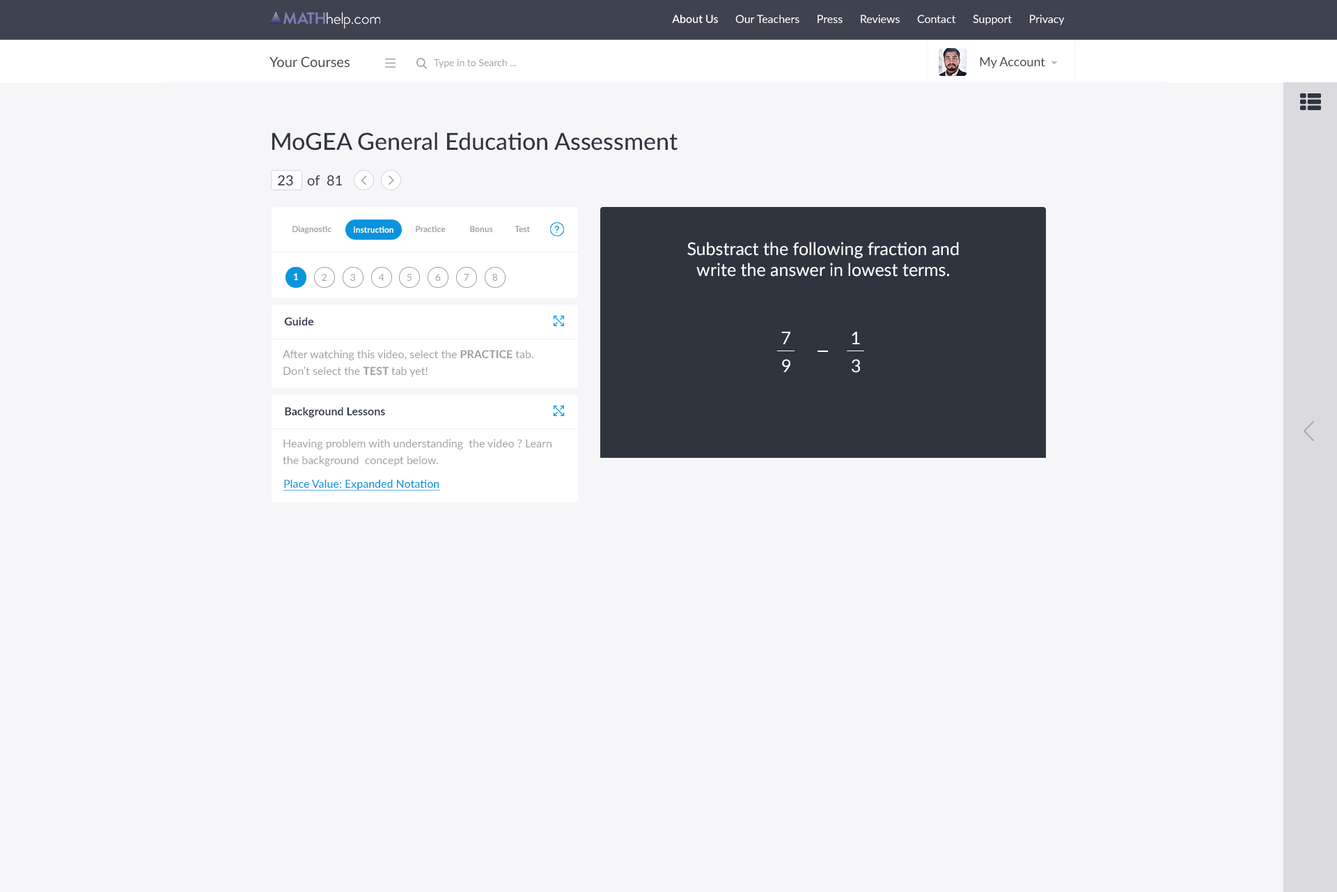
<style>
.page{position:relative;width:1337px;height:892px;background:#f6f6f8}
.page>*{position:absolute;margin:0}
.t1{font:11.1px "Lato-Regular";color:#ffffff}
.t2{font:11.1px "Lato-Medium";color:#ffffff}
.t3{font:13.9px "Lato-Regular";color:#3f434f}
.t4{font:9.8px "Lato-Regular";color:#a0a1a4}
.t5{font:12.5px "Lato-Regular";color:#3f434f}
.t6{font:23.7px "Lato-Medium";color:#2f353f}
.t7{font:13.9px "Lato-Medium";color:#32394d}
.t8{font:13.9px "Lato-Regular";color:#32394d}
.t9{font:8.4px "Lato-Bold";color:#a0a1a4}
.t10{font:8.4px "Lato-Bold";color:#ffffff}
.t11{font:17.4px/20.9px "Lato-Regular";color:#ffffff}
.t12{font:9.8px "Lato-Bold";color:#ffffff}
.t13{font:11.1px "Lato-Bold";color:#32394d}
.t14{font:17.4px "Lato-Regular";color:#ffffff}
.t15{font:11.1px/16.7px "Lato-Regular";color:#9a9fa5}
.t16{font:11.1px/16.7px "Lato-Bold";color:#9a9fa5}
.t17{font:11.1px "Lato-Medium";color:#0894dd;text-decoration:underline}
</style>
<div class="page">
<p class="t1" style="left:672px;top:15px;width:393px;height:10px"><span class="t2">About Us</span>      Our Teachers      Press      Reviews      Contact      Support      Privacy</p>
<p class="t3" style="left:270px;top:56px;width:80px;height:12px">Your Courses</p>
<p class="t4" style="left:434px;top:59px;width:83px;height:9px">Type in to Search ...</p>
<p class="t5" style="left:980px;top:57px;width:66px;height:11px">My Account</p>
<p class="t6" style="left:272px;top:132px;width:406px;height:18px">MoGEA General Education Assessment</p>
<p class="t7" style="left:278px;top:175px;width:15px;height:11px">23</p>
<p class="t8" style="left:307px;top:175px;width:35px;height:11px">of  81</p>
<p class="t9" style="left:293px;top:226px;width:39px;height:8px">Diagnostic</p>
<p class="t10" style="left:354px;top:226px;width:40px;height:7px">Instruction</p>
<p class="t9" style="left:416px;top:226px;width:30px;height:6px">Practice</p>
<p class="t9" style="left:470px;top:226px;width:23px;height:6px">Bonus</p>
<p class="t9" style="left:515px;top:226px;width:15px;height:6px">Test</p>
<p class="t11" style="left:688px;top:242px;width:271px;height:35px;text-align:center">Substract the following fraction and<br>write the answer in lowest terms.</p>
<p class="t12" style="left:293px;top:273px;width:5px;height:7px">1</p>
<p class="t4" style="left:322px;top:274px;width:5px;height:7px">2</p>
<p class="t4" style="left:350px;top:274px;width:5px;height:7px">3</p>
<p class="t4" style="left:379px;top:274px;width:6px;height:7px">4</p>
<p class="t4" style="left:407px;top:274px;width:5px;height:7px">5</p>
<p class="t4" style="left:435px;top:274px;width:6px;height:7px">6</p>
<p class="t4" style="left:464px;top:274px;width:5px;height:7px">7</p>
<p class="t4" style="left:492px;top:274px;width:6px;height:7px">8</p>
<p class="t13" style="left:284px;top:317px;width:29px;height:8px">Guide</p>
<p class="t14" style="left:782px;top:332px;width:9px;height:12px">7</p>
<p class="t14" style="left:852px;top:332px;width:8px;height:12px">1</p>
<p class="t15" style="left:283px;top:350px;width:251px;height:27px">After watching this video, select the <span class="t16">PRACTICE</span> tab.<br>Don’t select the <span class="t16">TEST </span>tab yet!</p>
<p class="t14" style="left:782px;top:359px;width:9px;height:13px">9</p>
<p class="t14" style="left:852px;top:359px;width:8px;height:14px">3</p>
<p class="t13" style="left:285px;top:407px;width:100px;height:10px">Background Lessons</p>
<p class="t15" style="left:283px;top:439px;width:269px;height:27px">Heaving problem with understanding  the video ? Learn the background  concept below.</p>
<p class="t17" style="left:283px;top:479px;width:157px;height:11px">Place Value: Expanded Notation</p>
</div>
